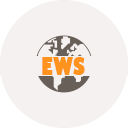
<style>
.page{position:relative;width:128px;height:128px;background:#f4f1f0}
.page>*{position:absolute;margin:0}
.t1{font:24px "GillSans-UltraBoldCondensed";color:#ff931e}
</style>
<div class="page">
<p class="t1" style="left:42px;top:57px;width:43px;height:18px">EWS</p>
</div>
